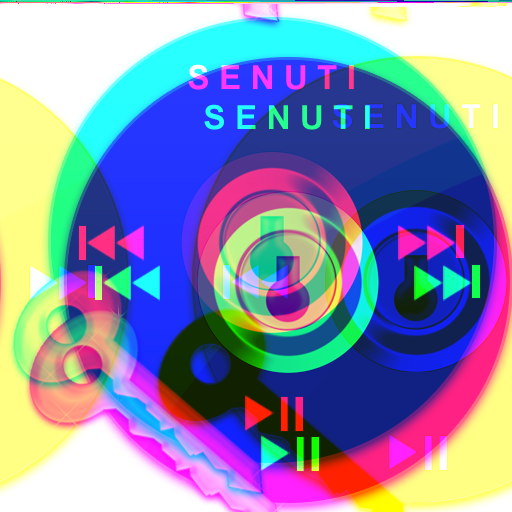
<style>
.page{position:relative;width:512px;height:512px}
.page>*{position:absolute;margin:0}
.t1{font:33.3px "Arial-BoldMT"}
</style>
<div class="page">
<p class="t1" style="left:188px;top:62px;width:166px;height:26px">S E N U T I</p>
</div>
